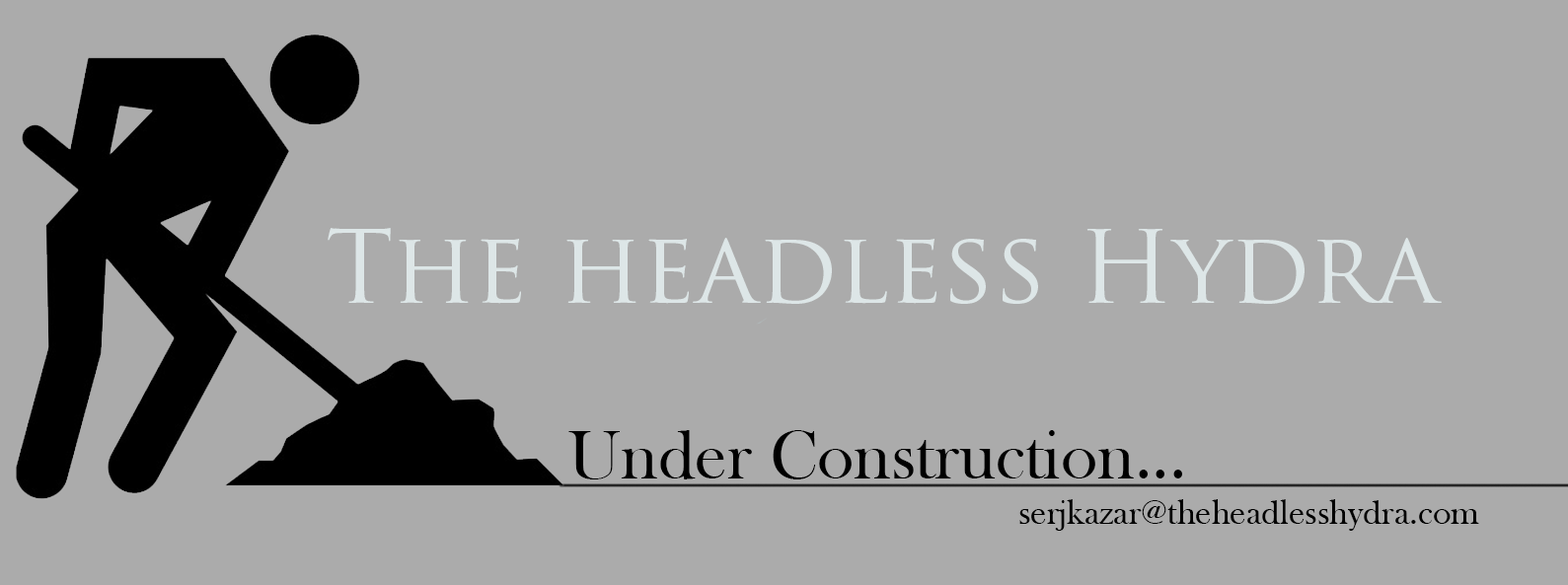
<style>
.page{position:relative;width:1568px;height:585px;background:#ababab}
.page>*{position:absolute;margin:0}
.t1{font:98.7px "TrajanPro-Regular";color:#dde6e7}
.t2{font:71px "BaskOldFace";color:#000000}
.t3{font:35.5px "BaskOldFace";color:#000000}
</style>
<div class="page">
<p class="t1" style="left:328px;top:228px;width:1114px;height:76px">The headless Hydra</p>
<p class="t2" style="left:568px;top:430px;width:614px;height:50px">Under Construction...</p>
<p class="t3" style="left:1019px;top:499px;width:460px;height:32px">serjkazar@theheadlesshydra.com</p>
</div>
